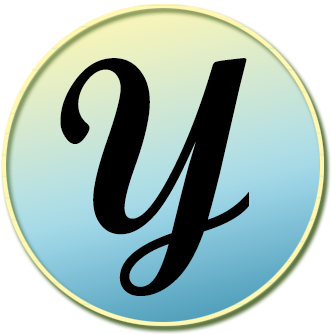
<style>
.page{position:relative;width:331px;height:334px;background:#ffffff}
.page>*{position:absolute;margin:0}
.t1{font:250px "ScriptMTBold";color:#000000}
</style>
<div class="page">
<p class="t1" style="left:60px;top:58px;width:189px;height:238px">Y</p>
</div>
